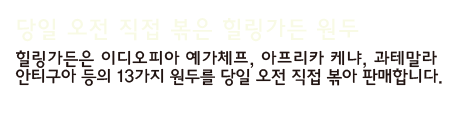
<style>
.page{position:relative;width:450px;height:120px;background:#ffffff}
.page>*{position:absolute;margin:0}
.t1{font:18px/18px "HaanYGodic23";letter-spacing:-0.06em;color:#201310}
.t2{font:24px/24px "HaanYGodic23";color:#f8fae5}
.t3{font:18px/18px "HaanYGodic23";letter-spacing:-0.02em;color:#201310}
</style>
<div class="page">
<p class="t1" style="left:15px;top:18px;width:427px;height:68px"><span class="t2">당일 오전 직접 볶은 힐링가든 원두<br></span><span class="t3">힐링가든은 이디오피아 예가체프, 아프리카 케냐, 과테말라<br></span>안티구아 등의 13가지 원두를 당일 오전 직접 볶아 판매합니다.</p>
</div>
